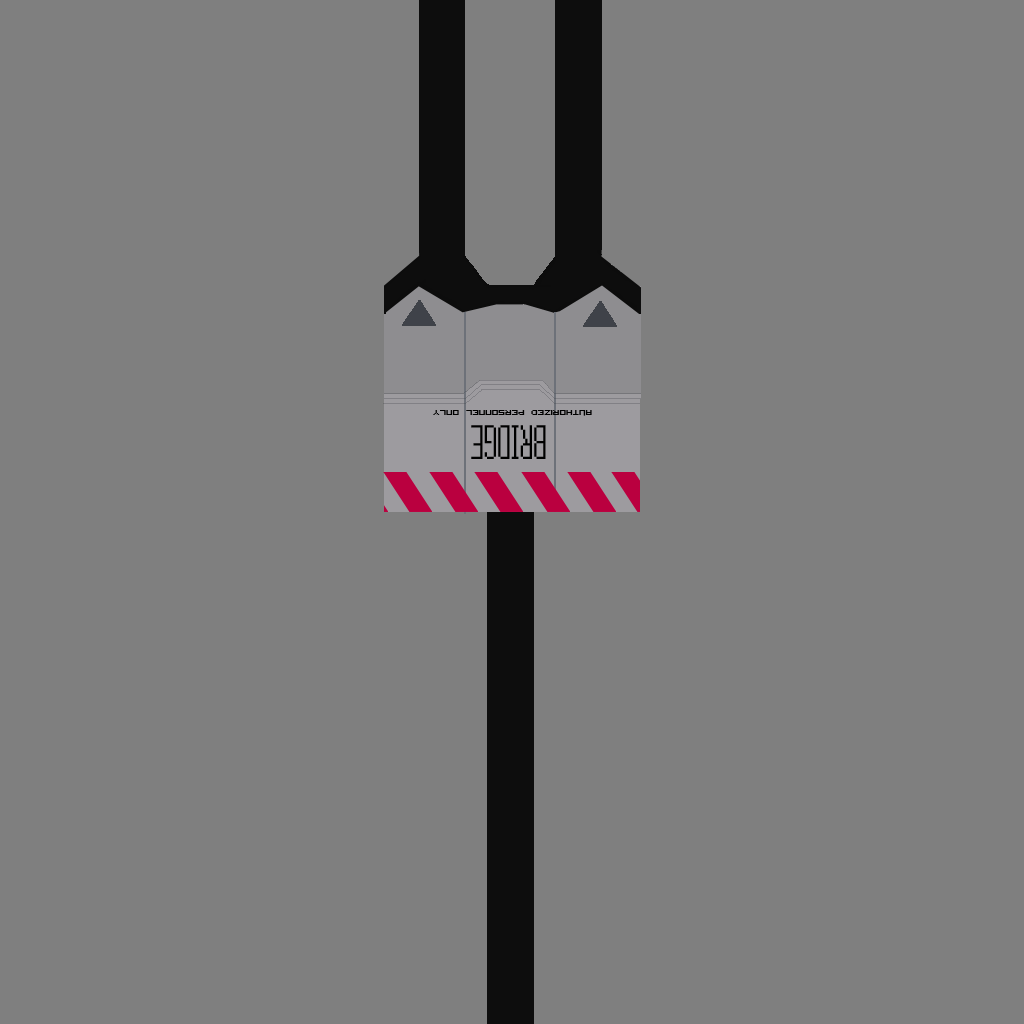
<style>
.page{position:relative;width:1024px;height:1024px;background:#7f7f7f}
.page>*{position:absolute;margin:0}
.t1{font:14px "VisitorTT2BRK";color:#000000}
.t2{font:36px "15x5";color:#000000}
</style>
<div class="page">
<p class="t1" style="left:433px;top:410px;width:159px;height:6px;rotate:180deg">Authorized Personnel Only</p>
<p class="t2" style="left:471px;top:425px;width:75px;height:34px;rotate:180deg">BRIDGE</p>
</div>
